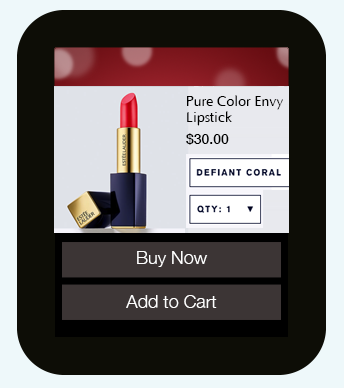
<style>
.page{position:relative;width:344px;height:388px;background:#0d0d06}
.page>*{position:absolute;margin:0}
.t1{font:14px/18px "Optima";color:#000000}
.t2{font:14px/16px "Optima";color:#000000}
.t3{font:14px/22px "HelveticaNeue-Medium";color:#000000}
.t4{font:18px "HelveticaNeue-Light";color:#ffffff}
</style>
<div class="page">
<p class="t1" style="left:186px;top:95px;width:97px;height:50px">Pure Color Envy<br><span class="t2">Lipstick<br></span><span class="t3">$30.00</span></p>
<p class="t4" style="left:137px;top:251px;width:71px;height:16px">Buy Now</p>
<p class="t4" style="left:126px;top:295px;width:91px;height:13px">Add to Cart</p>
</div>
